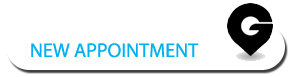
<style>
.page{position:relative;width:294px;height:77px;background:#ffffff}
.page>*{position:absolute;margin:0}
.t1{font:20px "MyriadPro-Regular";color:#00b0f0}
</style>
<div class="page">
<p class="t1" style="left:31px;top:43px;width:168px;height:15px">NEW APPOINTMENT</p>
</div>
